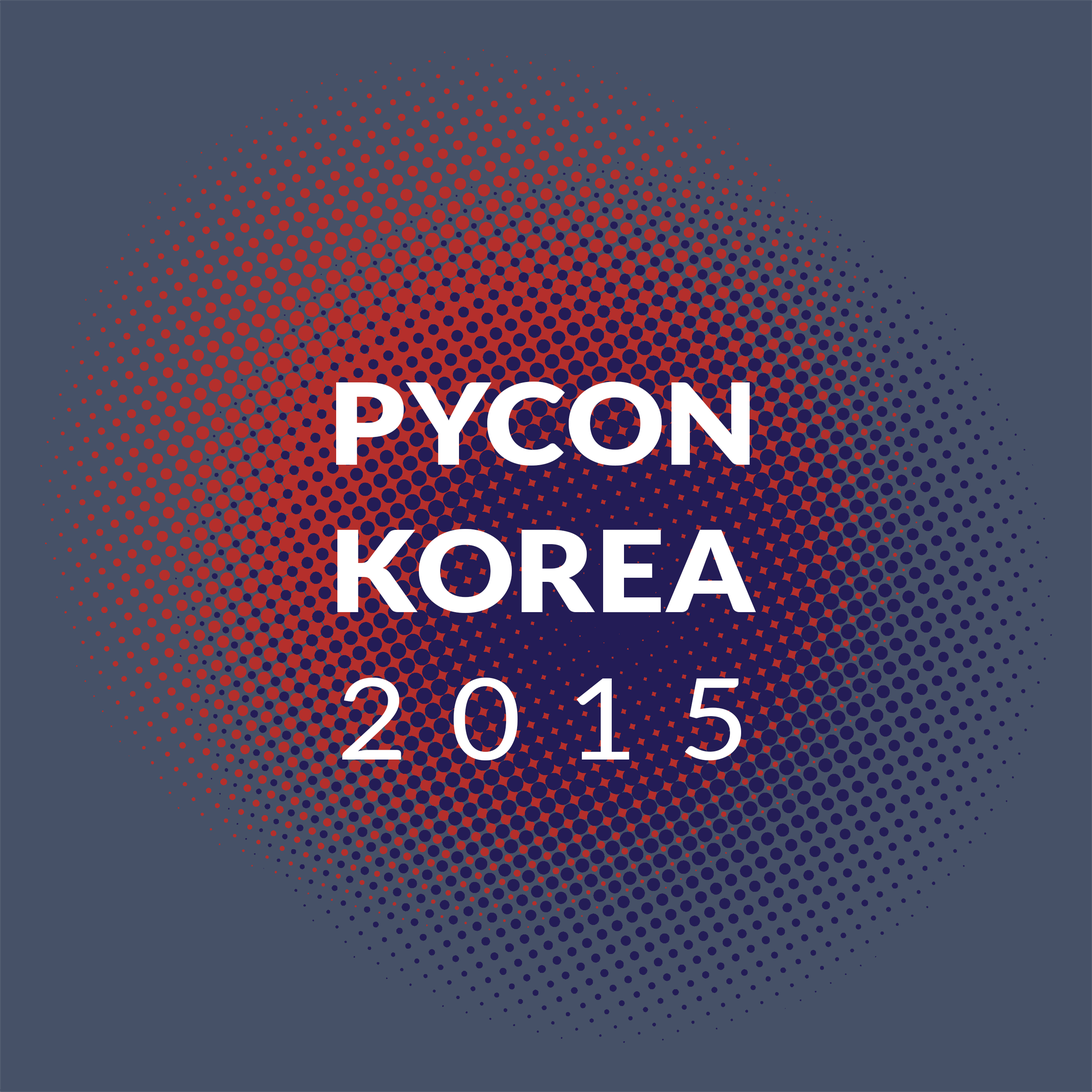
<style>
.page{position:relative;width:1092px;height:1092px;background:#465167}
.page>*{position:absolute;margin:0}
.t1{font:113px/147.4px "Lato-Black";color:#ffffff;scale:1.09 1}
.t2{font:113px/147.4px "Lato-Regular";letter-spacing:0.35em;color:#ffffff;scale:1.09 1}
</style>
<div class="page">
<p class="t1" style="left:336px;top:382px;width:420px;height:379px;text-align:center">PYCON<br>KOREA<br><span class="t2">2015</span></p>
</div>
